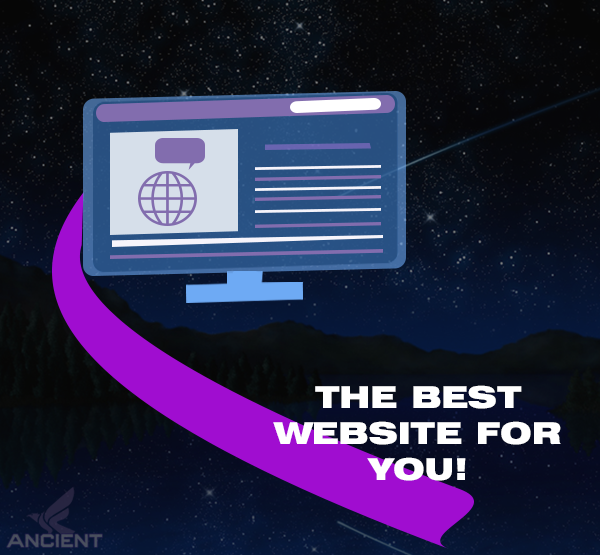
<style>
.page{position:relative;width:600px;height:555px}
.page>*{position:absolute;margin:0}
.t1{font:30px "Swiss721BT-BlackExtended";color:#ffffff}
</style>
<div class="page">
<p class="t1" style="left:273px;top:385px;width:288px;height:96px;text-align:center">THE BEST WEBSITE FOR YOU!</p>
</div>
